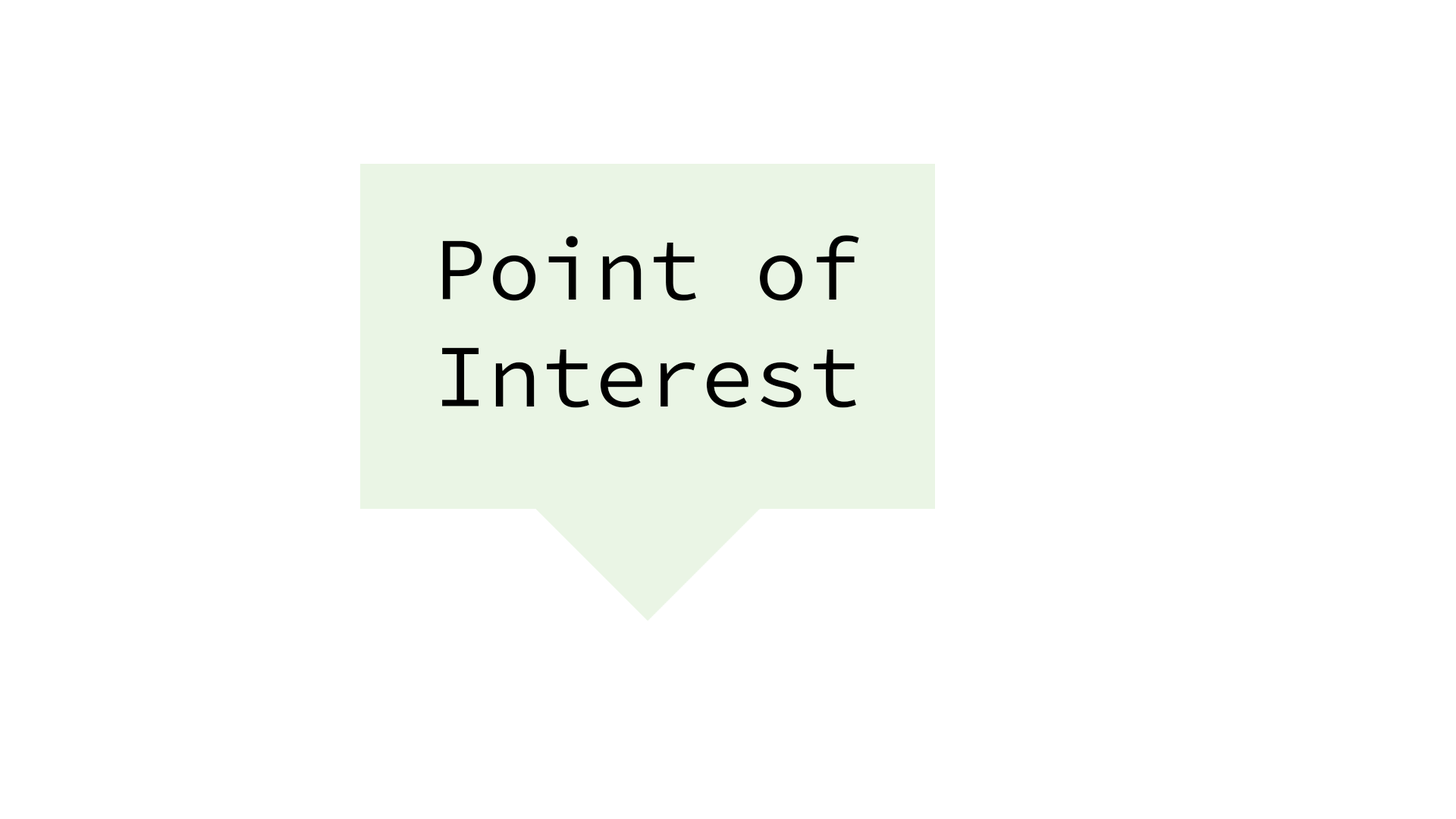
<style>
.page{position:relative;width:1456px;height:819px;background:#ffffff}
.page>*{position:absolute;margin:0}
.t1{font:89.1px "SourceCodePro-Regular";color:#000000}
</style>
<div class="page">
<p class="t1" style="left:442px;top:235px;width:417px;height:173px;text-align:center">Point of<br>Interest</p>
</div>
